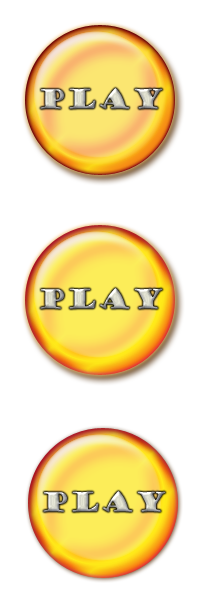
<style>
.page{position:relative;width:200px;height:600px;background:#ffffff}
.page>*{position:absolute;margin:0}
.t1{font:26px "GoudyStout"}
</style>
<div class="page">
<p class="t1" style="left:40px;top:88px;width:123px;height:21px">PLAY</p>
<p class="t1" style="left:40px;top:288px;width:123px;height:21px">PLAY</p>
<p class="t1" style="left:43px;top:491px;width:123px;height:21px">PLAY</p>
</div>
